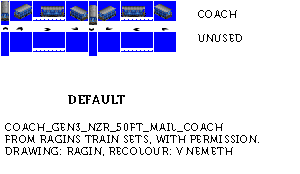
<style>
.page{position:relative;width:300px;height:174px;background:#ffffff}
.page>*{position:absolute;margin:0}
.t1{font:10px "Museo700-Regular";letter-spacing:0.075em;color:#000000;text-transform:uppercase}
.t2{font:12px "Museo700-Regular";letter-spacing:0.075em;color:#000000;text-transform:uppercase}
</style>
<div class="page">
<p class="t1" style="left:198px;top:10px;width:44px;height:32px">coach<br><br>unused</p>
<p class="t2" style="left:68px;top:95px;width:57px;height:9px">DEFAULT</p>
<p class="t1" style="left:5px;top:123px;width:254px;height:33px">Coach_Gen3_NZR_50ft_mail_Coach<br>From Ragins Train Sets, with permission.<br>Drawing: Ragin, recolour: V Nemeth</p>
</div>
